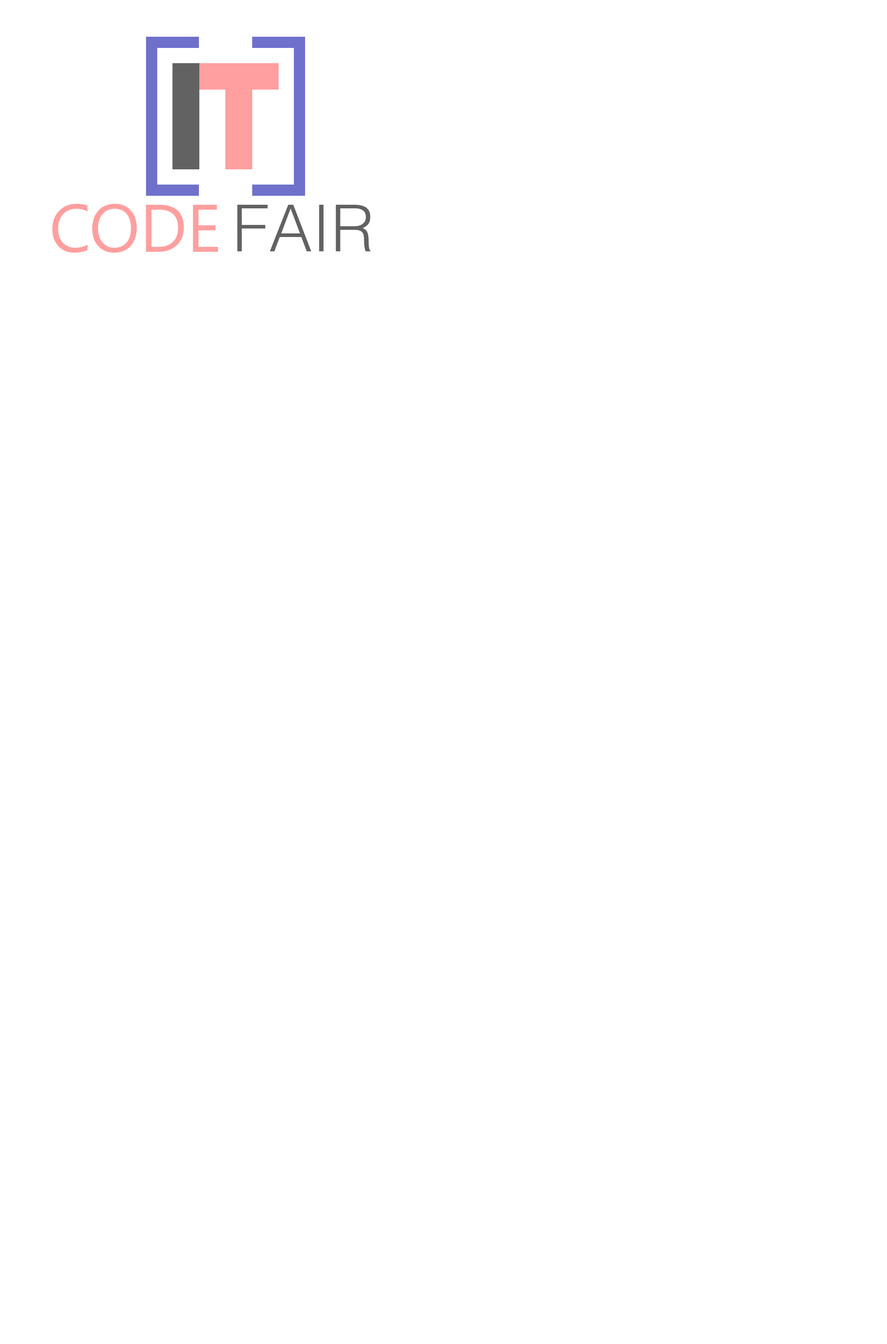
<style>
.page{position:relative;width:887px;height:1344px;background:#ffffff}
.page>*{position:absolute;margin:0}
.t1{font:67.2px "SegoeUI";color:#ff9f9f}
.t2{font:65.3px "HelvLight-Normal";color:#626262}
</style>
<div class="page">
<p class="t1" style="left:52px;top:204px;width:166px;height:49px">CODE</p>
<p class="t2" style="left:237px;top:205px;width:134px;height:46px">FAIR</p>
</div>
